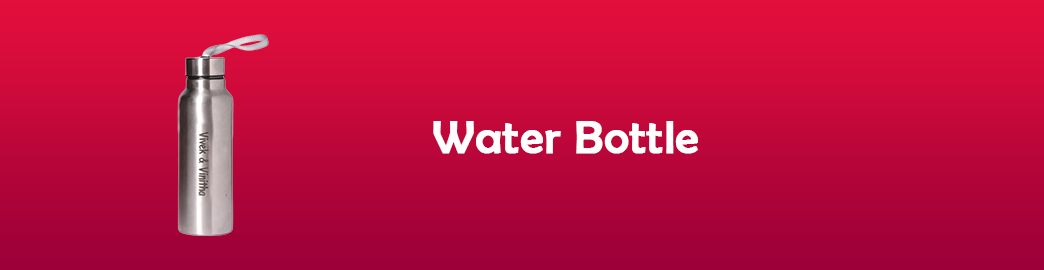
<style>
.page{position:relative;width:1044px;height:270px}
.page>*{position:absolute;margin:0}
.t1{font:47.1px "BerlinSansFB-Reg";color:#ffffff;font-weight:bold}
</style>
<div class="page">
<p class="t1" style="left:433px;top:121px;width:265px;height:33px">Water Bottle</p>
</div>
